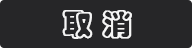
<style>
.page{position:relative;width:192px;height:48px;background:#262628}
.page>*{position:absolute;margin:0}
.t1{font:30px "STCaiyun";color:#f6f6f6;font-weight:bold}
</style>
<div class="page">
<p class="t1" style="left:62px;top:10px;width:70px;height:29px">取 消</p>
</div>
